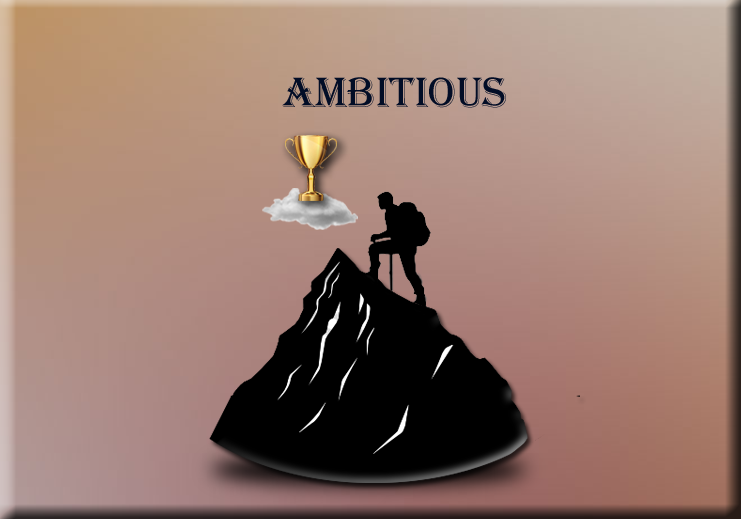
<style>
.page{position:relative;width:741px;height:519px}
.page>*{position:absolute;margin:0}
.t1{font:44px "Algerian";color:#020d26}
</style>
<div class="page">
<p class="t1" style="left:282px;top:77px;width:224px;height:31px">Ambitious</p>
</div>
